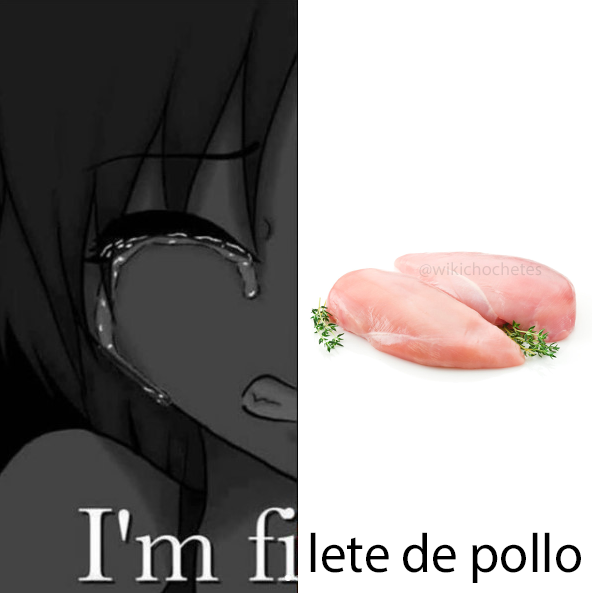
<style>
.page{position:relative;width:592px;height:593px;background:#ffffff}
.page>*{position:absolute;margin:0}
.t1{font:18.1px "MyriadPro-Regular";color:#e1c0bd}
.t2{font:55.5px "MyriadPro-Regular";color:#000000;scale:0.96 1}
</style>
<div class="page">
<p class="t1" style="left:419px;top:262px;width:123px;height:15px">@wikichochetes</p>
<p class="t2" style="left:310px;top:532px;width:271px;height:51px">lete de pollo</p>
</div>
